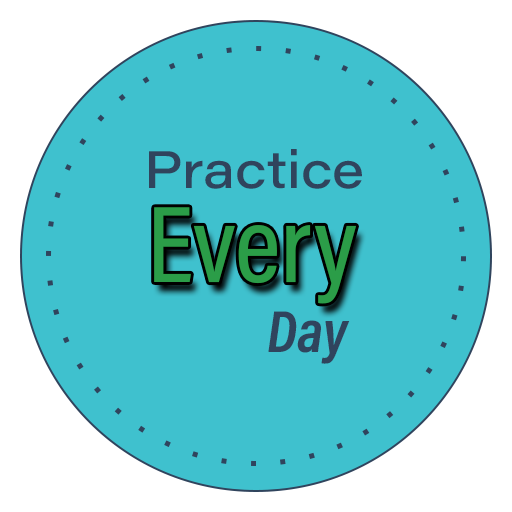
<style>
.page{position:relative;width:512px;height:512px;background:#3fc1ce}
.page>*{position:absolute;margin:0}
.t1{font:52px "AcuminConcept-WideMedium";color:#30445d}
.t2{font:110px "AcuminConcept-CondensedMedium";color:#2b9d48}
.t3{font:60px "AcuminConcept_658wght_67.5wdth_8slnt";color:#30445d}
</style>
<div class="page">
<p class="t1" style="left:149px;top:149px;width:213px;height:40px">Practice</p>
<p class="t2" style="left:154px;top:207px;width:202px;height:97px">Every</p>
<p class="t3" style="left:268px;top:311px;width:82px;height:53px">Day</p>
</div>
